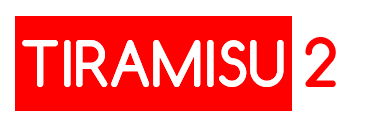
<style>
.page{position:relative;width:369px;height:128px;background:#ffffff}
.page>*{position:absolute;margin:0}
.t1{font:60px "Comfortaa-Bold";color:#ffffff}
.t2{font:64px "Comfortaa-Bold";color:#ff0000}
</style>
<div class="page">
<p class="t1" style="left:22px;top:37px;width:314px;height:50px">TIRAMISU <span class="t2">2</span></p>
</div>
